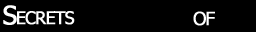
<style>
.page{position:relative;width:256px;height:32px;background:#000000}
.page>*{position:absolute;margin:0}
.t1{font:25px "Tahoma";letter-spacing:-0.055em;color:#ffffff;font-variant:small-caps;font-weight:bold}
.t2{font:26px "Tahoma";letter-spacing:-0.055em;color:#ffffff;font-variant:small-caps;font-weight:bold}
</style>
<div class="page">
<p class="t1" style="left:3px;top:5px;width:72px;height:20px">Secrets</p>
<p class="t2" style="left:193px;top:11px;width:22px;height:15px">of</p>
</div>
